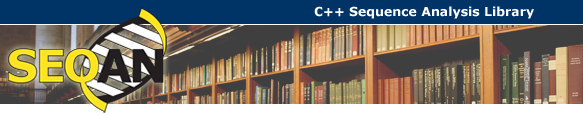
<style>
.page{position:relative;width:583px;height:115px}
.page>*{position:absolute;margin:0}
.t1{font:12.5px "Verdana-Bold";color:#ffffff}
</style>
<div class="page">
<p class="t1" style="left:314px;top:6px;width:220px;height:13px">C++ Sequence Analysis Library</p>
</div>
